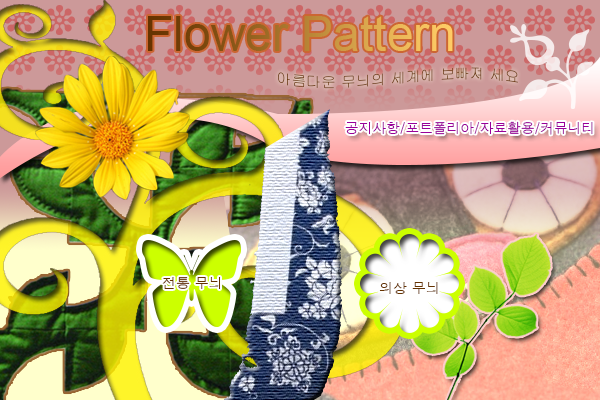
<style>
.page{position:relative;width:600px;height:400px}
.page>*{position:absolute;margin:0}
.t1{font:48.2px "ArialMT"}
.t2{font:14.9px "Gulim";color:#6b3b0c}
.t3{font:13.9px "Dotum";color:#990099}
.t4{font:13.9px "Dotum";color:#663300}
</style>
<div class="page">
<p class="t1" style="left:148px;top:16px;width:305px;height:35px">Flower Pattern</p>
<p class="t2" style="left:278px;top:67px;width:240px;height:22px">아름다운 무늬의 세계에 보빠져 세요</p>
<p class="t3" style="left:345px;top:121px;width:248px;height:14px">공지사항/포트폴리아/자료활용/커뮤니티</p>
<p class="t4" style="left:162px;top:277px;width:59px;height:12px">전통 무늬</p>
<p class="t4" style="left:379px;top:282px;width:59px;height:12px">의상 무늬</p>
</div>
